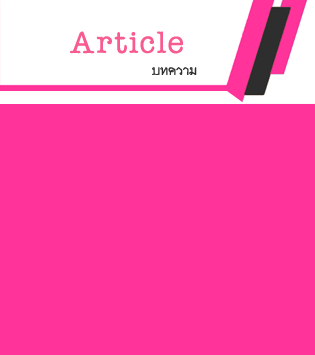
<style>
.page{position:relative;width:315px;height:355px;background:#ff3399}
.page>*{position:absolute;margin:0}
.t1{font:45.1px "DSNDuSit";color:#f85b90}
.t2{font:18.2px "DSNDuSit";color:#2e2e2e}
</style>
<div class="page">
<p class="t1" style="left:70px;top:31px;width:113px;height:23px">Article</p>
<p class="t2" style="left:152px;top:67px;width:45px;height:8px">บทความ</p>
</div>
